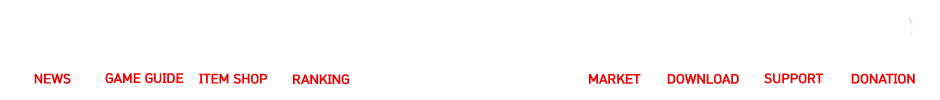
<style>
.page{position:relative;width:940px;height:100px;background:#ffffff}
.page>*{position:absolute;margin:0}
.t1{font:13px "HCRDotum-Bold";color:#e30000}
.t2{font:13px "HCRDotum-Bold";color:#f30000}
</style>
<div class="page">
<p class="t1" style="left:34px;top:73px;width:37px;height:11px">NEWS</p>
<p class="t2" style="left:105px;top:73px;width:79px;height:11px">GAME GUIDE</p>
<p class="t2" style="left:199px;top:73px;width:69px;height:11px">ITEM SHOP</p>
<p class="t2" style="left:293px;top:74px;width:57px;height:11px">RANKING</p>
<p class="t2" style="left:589px;top:74px;width:52px;height:10px">MARKET</p>
<p class="t2" style="left:667px;top:73px;width:72px;height:11px">DOWNLOAD</p>
<p class="t2" style="left:764px;top:73px;width:59px;height:11px">SUPPORT</p>
<p class="t2" style="left:851px;top:73px;width:64px;height:11px">DONATION</p>
</div>
